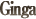
<style>
.page{position:relative;width:36px;height:19px;background:#ffffff}
.page>*{position:absolute;margin:0}
.t1{font:18px "RyuminPro-ExBold";letter-spacing:-0.11em;color:#4a3f32;font-weight:bold;scale:0.85 1}
</style>
<div class="page">
<p class="t1" style="left:0px;top:1px;width:37px;height:18px">Ginga</p>
</div>
